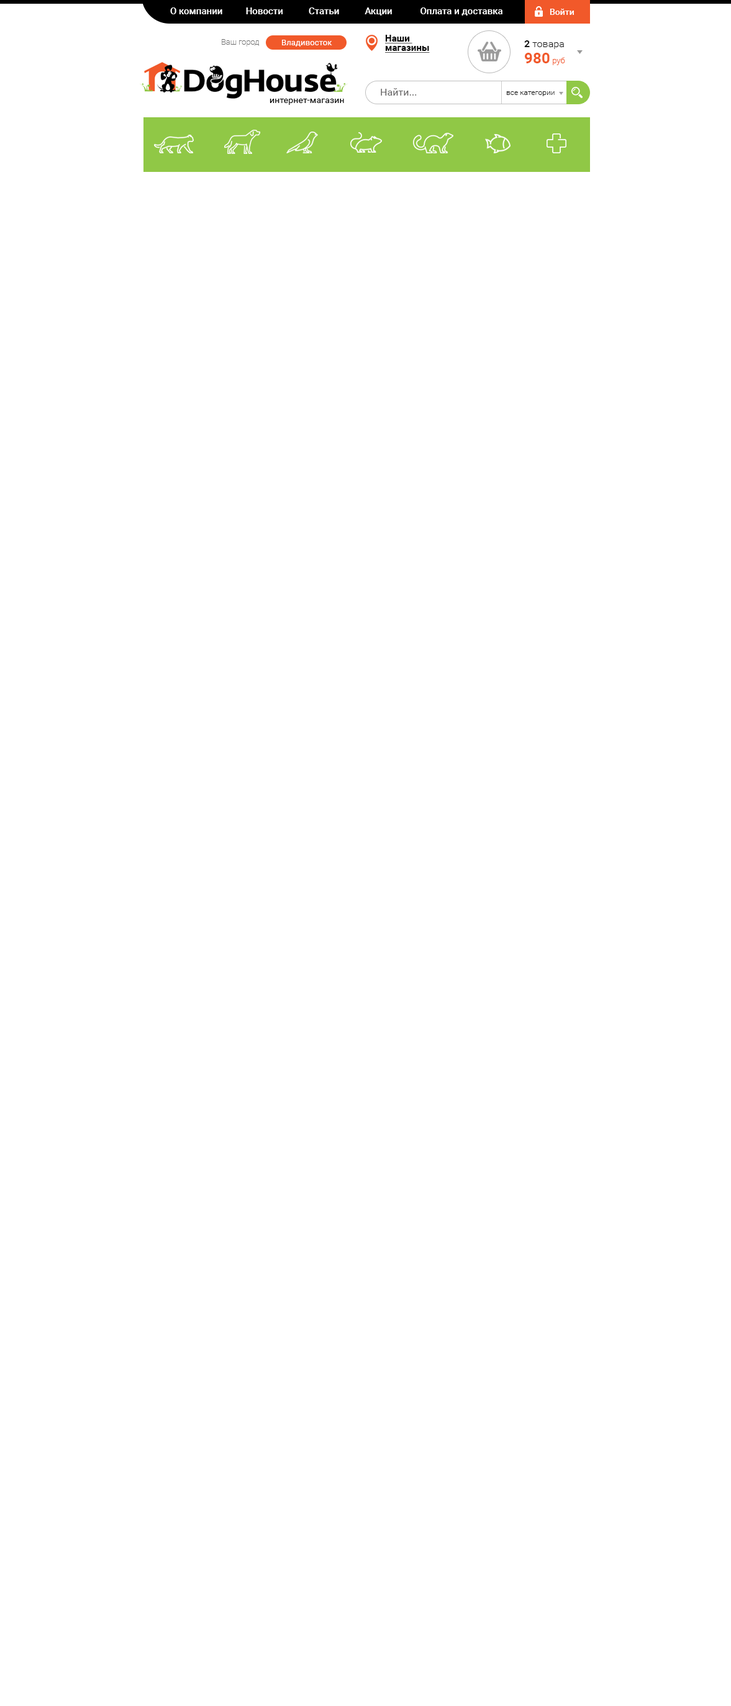
<style>
.page{position:relative;width:731px;height:1706px;background:#ffffff}
.page>*{position:absolute;margin:0}
.t1{font:9.3px "Roboto-Medium";color:#ffffff}
.t2{font:8.7px "Roboto-Medium";color:#ffffff}
.t3{font:8.1px "Roboto-Thin";color:#6f6f6f}
.t4{font:8.1px "Roboto-Regular";letter-spacing:0.01em;color:#ffffff}
.t5{font:9.3px/9.3px "Roboto-Bold";letter-spacing:0.005em;color:#000000;text-decoration:underline}
.t6{font:9.9px "Roboto-Light";letter-spacing:0.005em;color:#1b1b1b}
.t7{font:9.9px "Roboto-Bold";letter-spacing:0.005em;color:#1b1b1b}
.t8{font:14.9px "Roboto-Bold";letter-spacing:0.005em;color:#f1592a}
.t9{font:8.1px "Roboto-Light";letter-spacing:0.005em;color:#f1592a}
.t10{font:9.9px "Roboto-Regular";letter-spacing:0.005em;color:#646363}
.t11{font:8.7px "Roboto-Regular";letter-spacing:0.01em;color:#000000}
.t12{font:7.4px "Roboto-Light";letter-spacing:0.005em;color:#1b1b1b}
</style>
<div class="page">
<p class="t1" style="left:170px;top:7px;width:332px;height:9px">О компании          Новости           Статьи           Акции            Оплата и доставка</p>
<p class="t2" style="left:549px;top:9px;width:25px;height:6px">Войти</p>
<p class="t3" style="left:222px;top:39px;width:37px;height:8px">Ваш город</p>
<p class="t4" style="left:282px;top:40px;width:50px;height:7px">Владивосток</p>
<p class="t5" style="left:385px;top:35px;width:45px;height:18px">Наши <br>магазины</p>
<p class="t6" style="left:524px;top:40px;width:40px;height:9px"><span class="t7">2</span> товара</p>
<p class="t8" style="left:524px;top:53px;width:41px;height:12px">980 <span class="t9">руб</span></p>
<p class="t10" style="left:380px;top:88px;width:36px;height:8px">Найти...</p>
<p class="t11" style="left:269px;top:99px;width:75px;height:6px">интернет-магазин</p>
<p class="t12" style="left:506px;top:91px;width:48px;height:5px">все категории</p>
</div>
